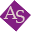
<style>
.page{position:relative;width:32px;height:32px;background:#ffffff}
.page>*{position:absolute;margin:0}
.t1{font:17.8px "PalatinoLinotype-Roman";color:#e2cece}
</style>
<div class="page">
<p class="t1" style="left:3px;top:6px;width:15px;height:13px">A</p>
<p class="t1" style="left:16px;top:10px;width:9px;height:13px">S</p>
</div>
